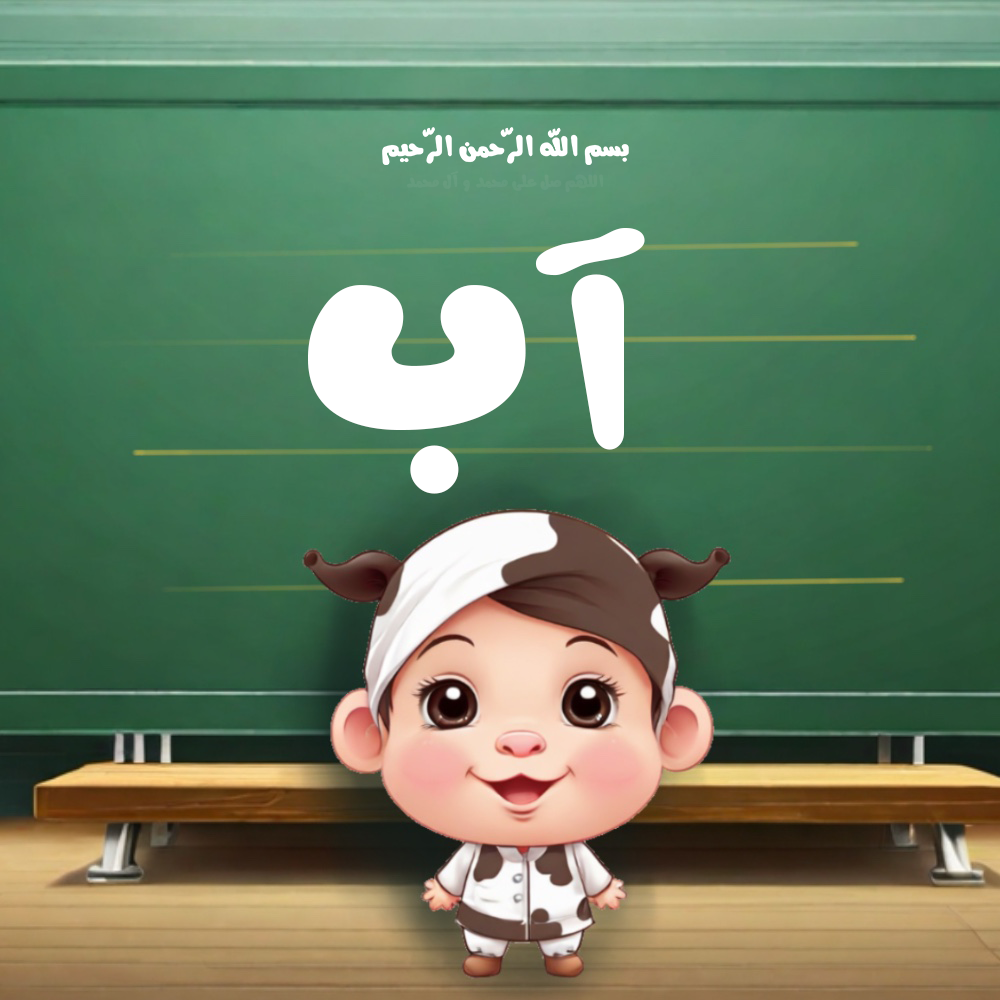
<style>
.page{position:relative;width:1000px;height:1000px}
.page>*{position:absolute;margin:0}
.t1{font:19.3px "MRT_Ramollah-Bold";color:#649b7d}
.t2{font:272.2px "MRT_Ramollah-Bold";color:#ffffff}
.t3{font:380px "MRT_Ramollah-Bold";color:#ffffff}
</style>
<div class="page">
<p class="t1" style="left:406px;top:171px;width:198px;height:22px">اللهم صل علی محمد و آل محمد</p>
<p class="t2" style="left:535px;top:228px;width:110px;height:222px">آ</p>
<p class="t3" style="left:308px;top:285px;width:218px;height:209px">ب</p>
</div>
